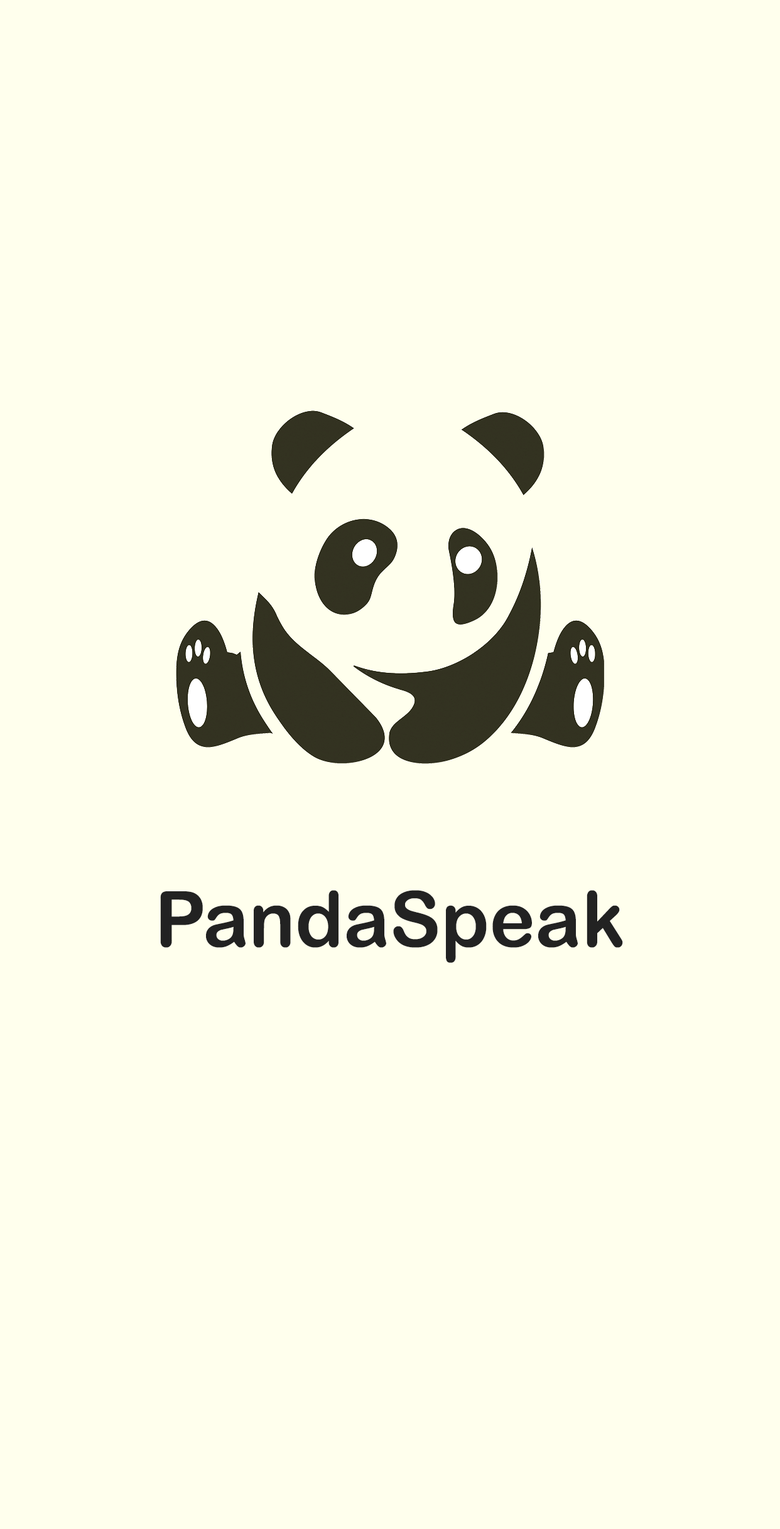
<style>
.page{position:relative;width:780px;height:1529px;background:#ffffed}
.page>*{position:absolute;margin:0}
.t1{font:77.2px "ArialRoundedMTBold";color:#222222}
</style>
<div class="page">
<p class="t1" style="left:160px;top:890px;width:463px;height:73px">PandaSpeak</p>
</div>
